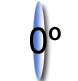
<style>
.page{position:relative;width:78px;height:81px;background:#ffffff}
.page>*{position:absolute;margin:0}
.t1{font:36px "ArialMT";color:#000000}
</style>
<div class="page">
<p class="t1" style="left:30px;top:27px;width:31px;height:27px">0º</p>
</div>
